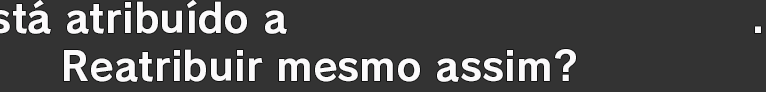
<style>
.page{position:relative;width:766px;height:92px;background:#333333}
.page>*{position:absolute;margin:0}
.t1{font:40px "RodinPro-B";color:#fbfafb}
</style>
<div class="page">
<p class="t1" style="left:755px;top:26px;width:6px;height:7px">.</p>
<p class="t1" style="left:64px;top:49px;width:512px;height:33px">Reatribuir mesmo assim?</p>
</div>
